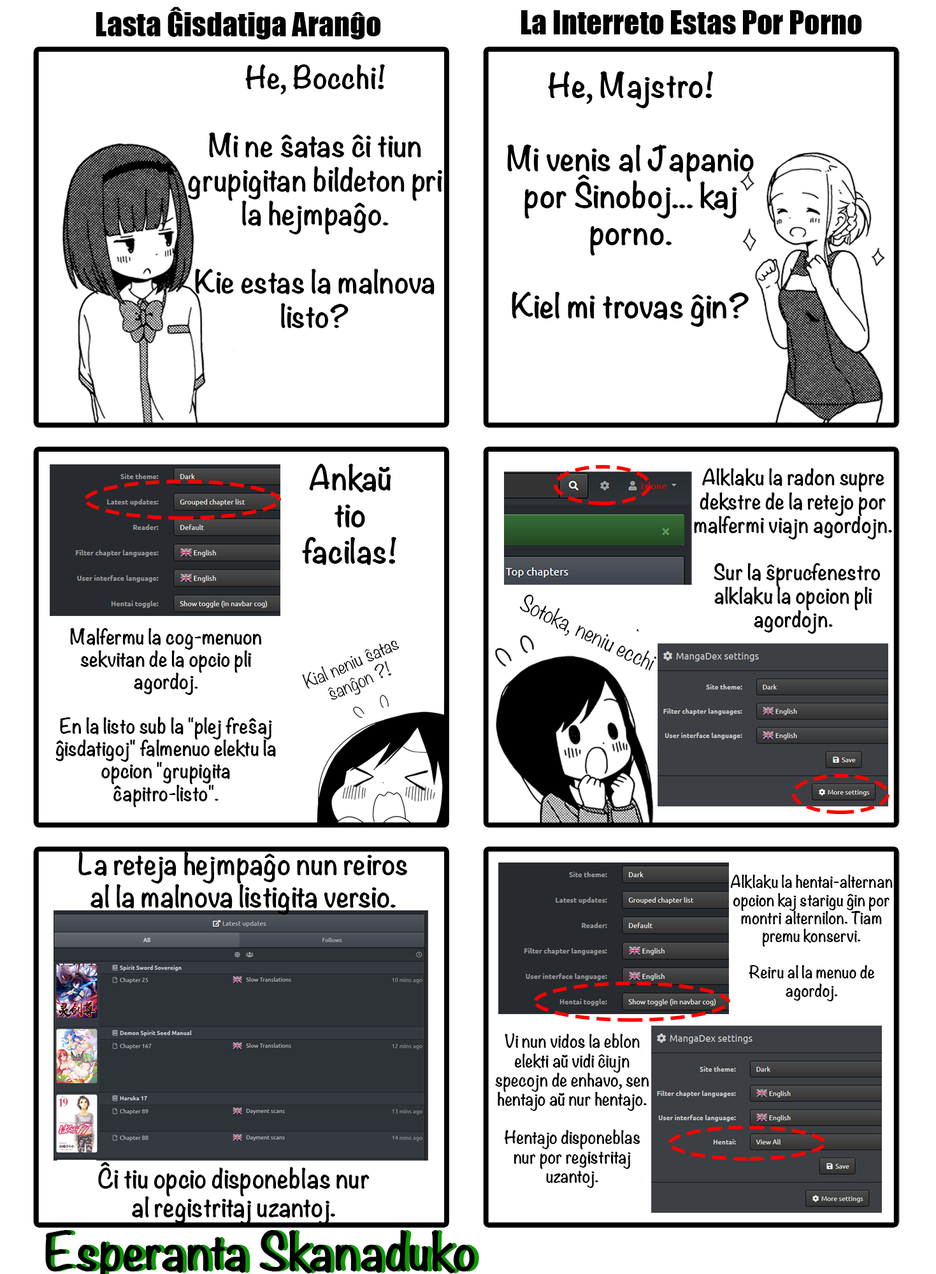
<style>
.page{position:relative;width:936px;height:1274px;background:#ffffff}
.page>*{position:absolute;margin:0}
.t1{font:30.6px "Impact";color:#000000}
.t2{font:28.4px "Noteworthy-Bold";color:#000000}
.t3{font:30.6px "Noteworthy-Bold";color:#000000}
.t4{font:19.7px "Noteworthy-Bold";color:#000000}
.t5{font:20.3px "Noteworthy-Light";color:#000000}
.t6{font:18.7px "Noteworthy-Bold";color:#000000}
.t7{font:17.1px "Noteworthy-Light";color:#000000}
.t8{font:26.8px "Noteworthy-Bold";color:#000000}
.t9{font:15.1px "Noteworthy-Bold";color:#000000}
.t10{font:16px "Noteworthy-Bold";color:#000000}
.t11{font:24px "Noteworthy-Bold";color:#000000}
</style>
<div class="page">
<p class="t1" style="left:96px;top:7px;width:285px;height:32px">Lasta Ĝisdatiga Aranĝo</p>
<p class="t1" style="left:521px;top:10px;width:341px;height:24px">La Interreto Estas Por Porno</p>
<p class="t2" style="left:188px;top:64px;width:254px;height:264px;text-align:center">He, Bocchi!<br><br>Mi ne ŝatas ĉi tiun grupigitan bildeton pri la hejmpaĝo.<br><br>Kie estas la malnova listo?</p>
<p class="t3" style="left:507px;top:71px;width:247px;height:256px;text-align:center">He, Majstro!<br><br>Mi venis al Japanio por Ŝinoboj... kaj porno.<br><br>Kiel mi trovas ĝin?</p>
<p class="t3" style="left:302px;top:464px;width:94px;height:101px;text-align:center">Ankaŭ tio facilas!</p>
<p class="t4" style="left:694px;top:468px;width:199px;height:166px;text-align:center">Alklaku la radon supre dekstre de la retejo por malfermi viajn agordojn.<br><br>  Sur la ŝprucfenestro alklaku la opcion pli agordojn.</p>
<p class="t5" style="left:519px;top:594px;width:138px;height:77px;rotate:25deg">Sotoka, neniu ecchi</p>
<p class="t6" style="left:55px;top:628px;width:221px;height:179px;text-align:center">Malfermu la cog-menuon sekvitan de la opcio pli agordoj.<br><br>En la listo sub la "plej freŝaj ĝisdatigoj" falmenuo elektu la opcion "grupigita ĉapitro-listo".</p>
<p class="t7" style="left:302px;top:640px;width:97px;height:60px;rotate:-24deg">Kial neniu ŝatas ŝanĝon ?!</p>
<p class="t8" style="left:78px;top:852px;width:329px;height:63px;text-align:center">La reteja hejmpaĝo nun reiros al la malnova listigita versio.</p>
<p class="t9" style="left:730px;top:875px;width:163px;height:126px;text-align:center">Alklaku la hentai-alternan opcion kaj starigu ĝin por montri alternilon. Tiam premu konservi.<br><br>Reiru al la menuo de agordoj.</p>
<p class="t10" style="left:495px;top:1033px;width:154px;height:155px;text-align:center">Vi nun vidos la eblon elekti aŭ vidi ĉiujn specojn de enhavo, sen hentajo aŭ nur hentajo.<br><br>Hentajo disponeblas nur por registritaj uzantoj.</p>
<p class="t11" style="left:98px;top:1162px;width:272px;height:63px;text-align:center">Ĉi tiu opcio disponeblas nur al registritaj uzantoj.</p>
</div>
